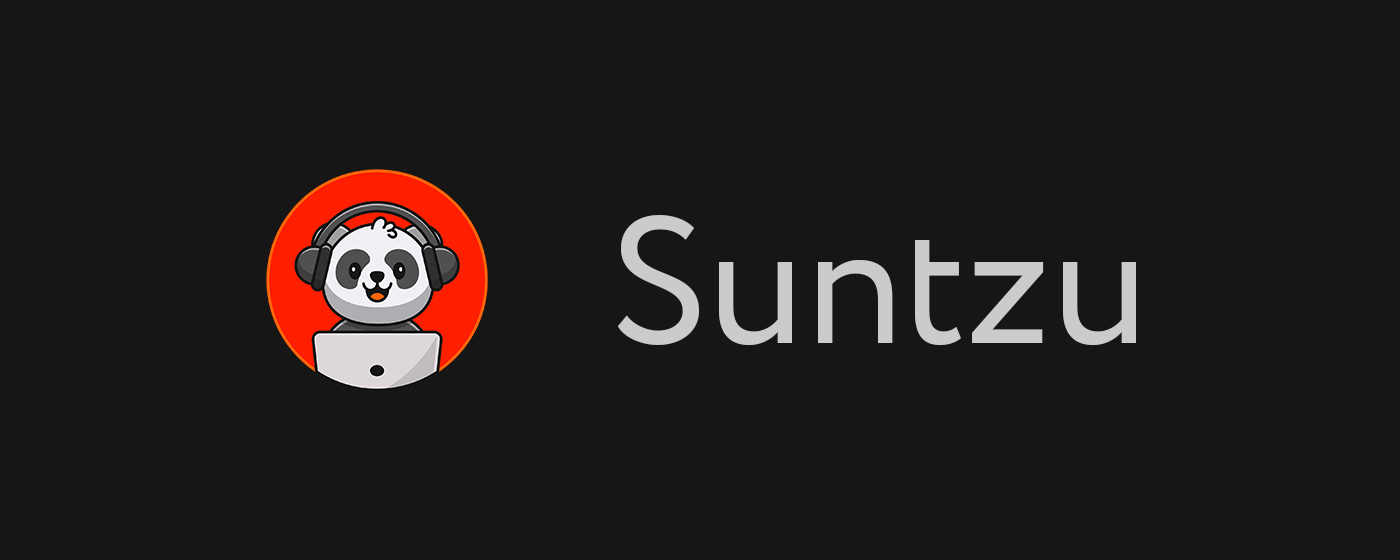
<style>
.page{position:relative;width:1400px;height:560px;background:#161616}
.page>*{position:absolute;margin:0}
.t1{font:179.6px "Circe-Regular";color:#caccca}
</style>
<div class="page">
<p class="t1" style="left:617px;top:215px;width:519px;height:130px">Suntzu</p>
</div>
